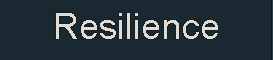
<style>
.page{position:relative;width:273px;height:60px;background:#1a2931}
.page>*{position:absolute;margin:0}
.t1{font:36.1px "ArialMT";color:#e1ddd4}
</style>
<div class="page">
<p class="t1" style="left:56px;top:13px;width:162px;height:26px">Resilience</p>
</div>
